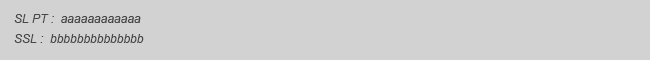
<style>
.page{position:relative;width:650px;height:60px;background:#d2d2d2}
.page>*{position:absolute;margin:0}
.t1{font:12px "Arial-ItalicMT";color:#464646}
</style>
<div class="page">
<p class="t1" style="left:14px;top:14px;width:127px;height:9px">SL PT :  aaaaaaaaaaaa</p>
<p class="t1" style="left:14px;top:34px;width:130px;height:9px">SSL :  bbbbbbbbbbbbbb</p>
</div>
